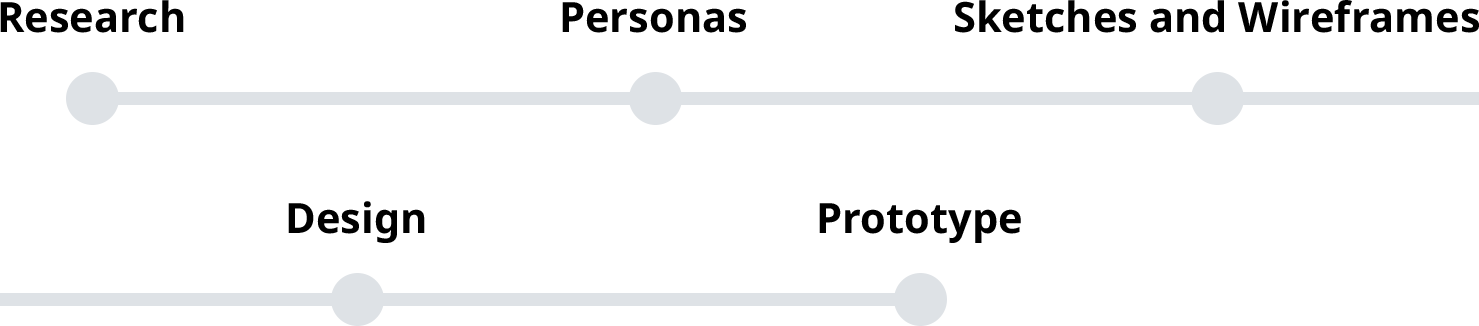
<style>
.page{position:relative;width:1479px;height:326px;background:#ffffff}
.page>*{position:absolute;margin:0}
.t1{font:41.7px "NotoSans-Bold";color:#000000}
</style>
<div class="page">
<p class="t1" style="left:0px;top:0px;width:184px;height:33px">Research</p>
<p class="t1" style="left:562px;top:2px;width:184px;height:31px">Personas</p>
<p class="t1" style="left:955px;top:0px;width:524px;height:33px">Sketches and Wireframes</p>
<p class="t1" style="left:288px;top:201px;width:137px;height:42px">Design</p>
<p class="t1" style="left:819px;top:203px;width:202px;height:40px">Prototype</p>
</div>
